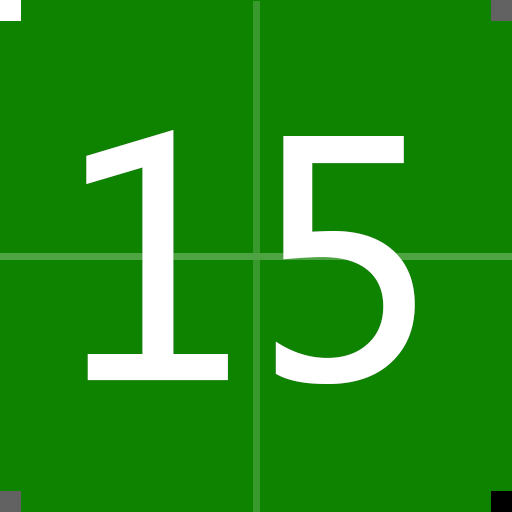
<style>
.page{position:relative;width:512px;height:512px;background:#0e8300}
.page>*{position:absolute;margin:0}
.t1{font:323.1px "MicrosoftYaHei";color:#ffffff}
</style>
<div class="page">
<p class="t1" style="left:86px;top:130px;width:329px;height:254px">15</p>
</div>
